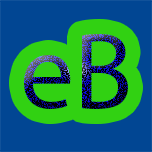
<style>
.page{position:relative;width:152px;height:152px;background:#014693}
.page>*{position:absolute;margin:0}
.t1{font:108.3px "MyriadPro-Regular"}
</style>
<div class="page">
<p class="t1" style="left:24px;top:34px;width:104px;height:75px">eB</p>
</div>
